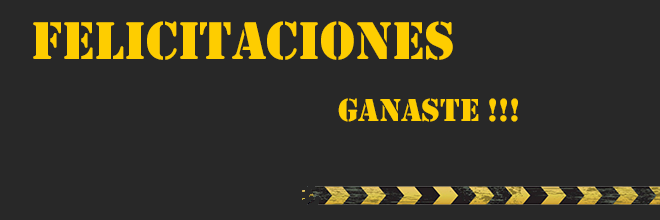
<style>
.page{position:relative;width:660px;height:220px;background:#282828}
.page>*{position:absolute;margin:0}
.t1{font:55px "Stencil";color:#fecd00}
.t2{font:33px "Stencil";color:#fecd00}
</style>
<div class="page">
<p class="t1" style="left:33px;top:21px;width:420px;height:39px">FELICITACIONES</p>
<p class="t2" style="left:338px;top:98px;width:180px;height:24px">GANASTE !!!</p>
</div>
